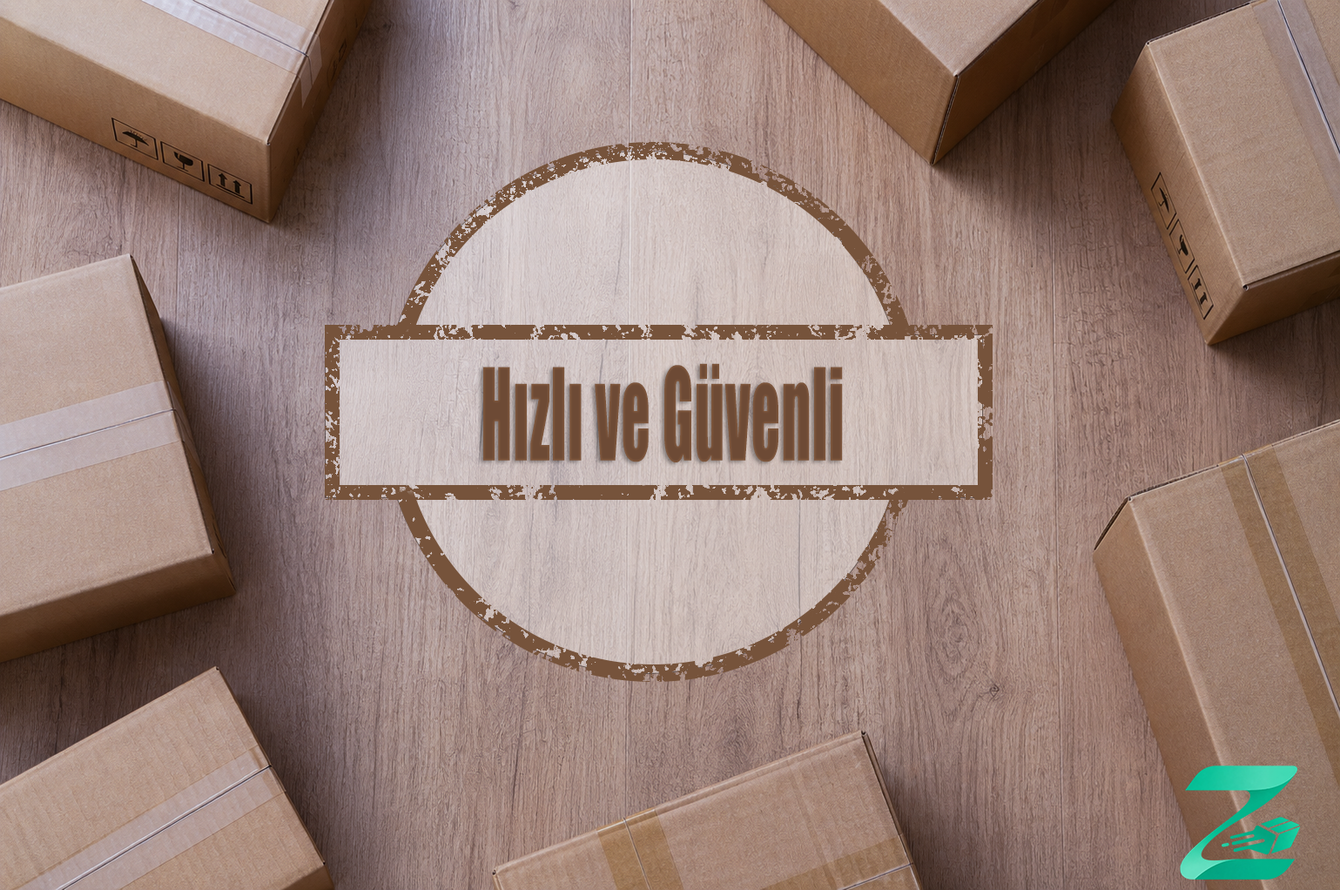
<style>
.page{position:relative;width:1340px;height:890px}
.page>*{position:absolute;margin:0}
.t1{font:118.3px "Impact";letter-spacing:0.02em;color:#6d4a35;scale:0.48 1}
</style>
<div class="page">
<p class="t1" style="left:483px;top:363px;width:360px;height:99px">Hızlı ve Güvenli</p>
</div>
